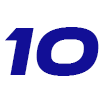
<style>
.page{position:relative;width:100px;height:100px;background:#ffffff}
.page>*{position:absolute;margin:0}
.t1{font:71px "EthnocentricRg-Italic";color:#120f96}
</style>
<div class="page">
<p class="t1" style="left:5px;top:27px;width:94px;height:49px">10</p>
</div>
